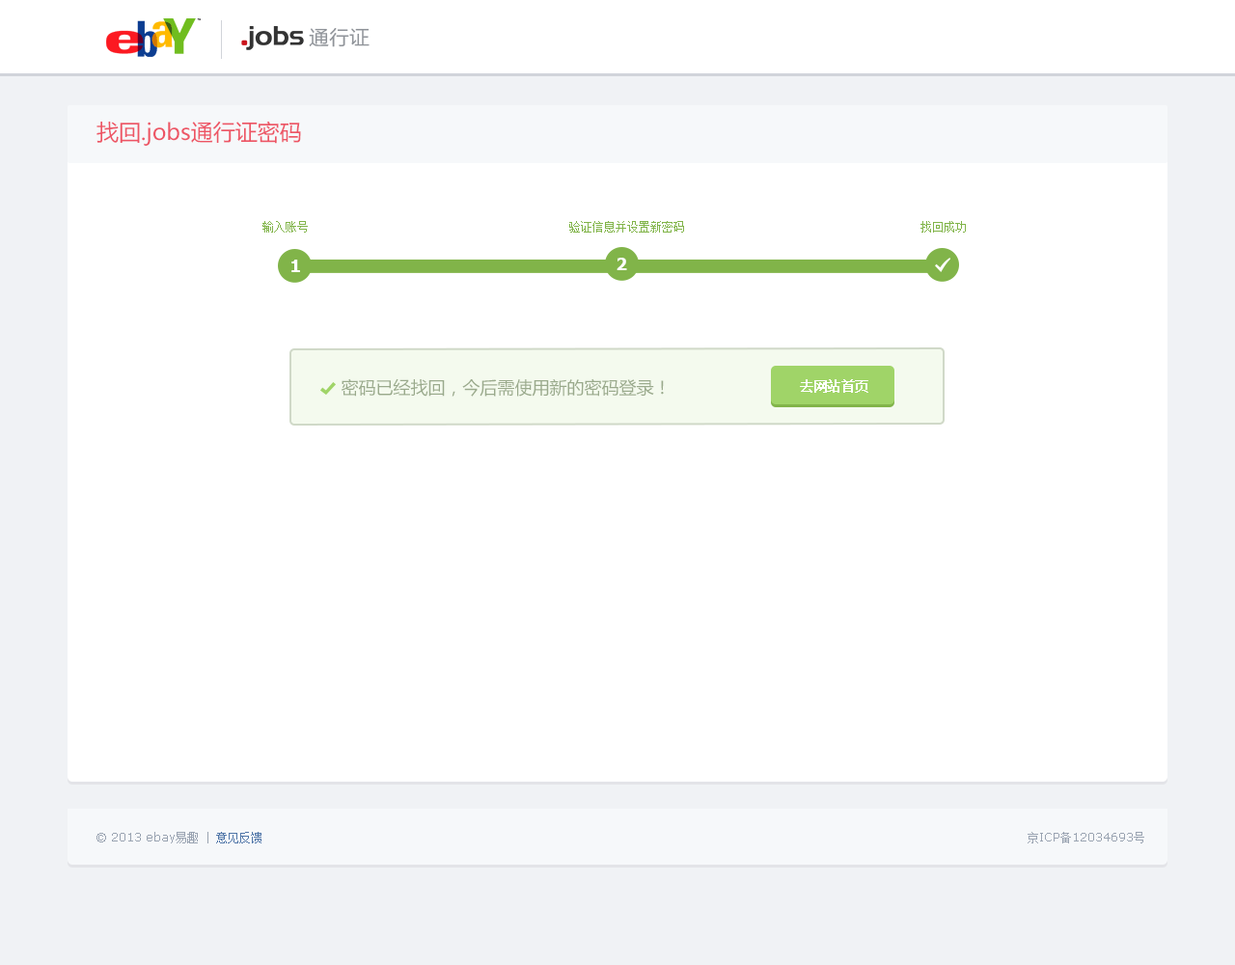
<style>
.page{position:relative;width:1235px;height:965px;background:#ffffff}
.page>*{position:absolute;margin:0}
.t1{font:20.3px "FZLTHJW--GB1-0";color:#8f9399}
.t2{font:22.2px "MicrosoftYaHei";color:#ed5565}
.t3{font:11.6px "SimSun";color:#81b449}
.t4{font:17.3px "Tahoma-Bold";color:#ffffff}
.t5{font:17.4px "MicrosoftYaHei";color:#9aaa8c}
.t6{font:13.5px "SimSun";color:#ffffff;text-transform:uppercase;font-weight:bold}
.t7{font:11.6px "Verdana";color:#99a3b1}
.t8{font:11.6px "SimSun";color:#99a3b1}
.t9{font:11.6px "SimSun";color:#5076a8}
</style>
<div class="page">
<p class="t1" style="left:309px;top:28px;width:61px;height:19px">通行证</p>
<p class="t2" style="left:97px;top:121px;width:204px;height:25px">找回.jobs通行证密码</p>
<p class="t3" style="left:263px;top:221px;width:45px;height:12px">输入账号</p>
<p class="t3" style="left:569px;top:221px;width:115px;height:12px">验证信息并设置新密码</p>
<p class="t3" style="left:921px;top:221px;width:45px;height:12px">找回成功</p>
<p class="t4" style="left:617px;top:258px;width:10px;height:12px">2</p>
<p class="t4" style="left:291px;top:260px;width:9px;height:12px">1</p>
<p class="t5" style="left:341px;top:378px;width:323px;height:19px">密码已经找回，今后需使用新的密码登录！</p>
<p class="t6" style="left:800px;top:379px;width:69px;height:14px">去网站首页</p>
<p class="t7" style="left:97px;top:832px;width:165px;height:12px">© 2013 ebay<span class="t8">易趣</span><span class="t8"> | </span><span class="t9">意见反馈</span></p>
<p class="t7" style="left:1028px;top:832px;width:117px;height:12px"><span class="t8">京</span>ICP<span class="t8">备</span>12034693<span class="t8">号</span></p>
</div>
